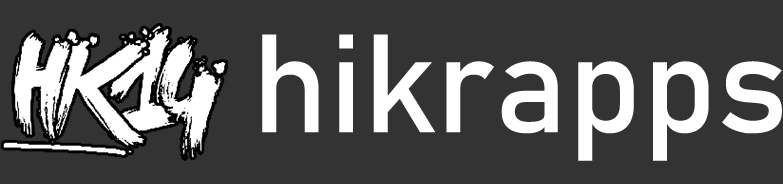
<style>
.page{position:relative;width:783px;height:184px;background:#333333}
.page>*{position:absolute;margin:0}
.t1{font:137.5px "Bahnschrift";color:#ffffff}
</style>
<div class="page">
<p class="t1" style="left:262px;top:34px;width:520px;height:127px">hikrapps</p>
</div>
